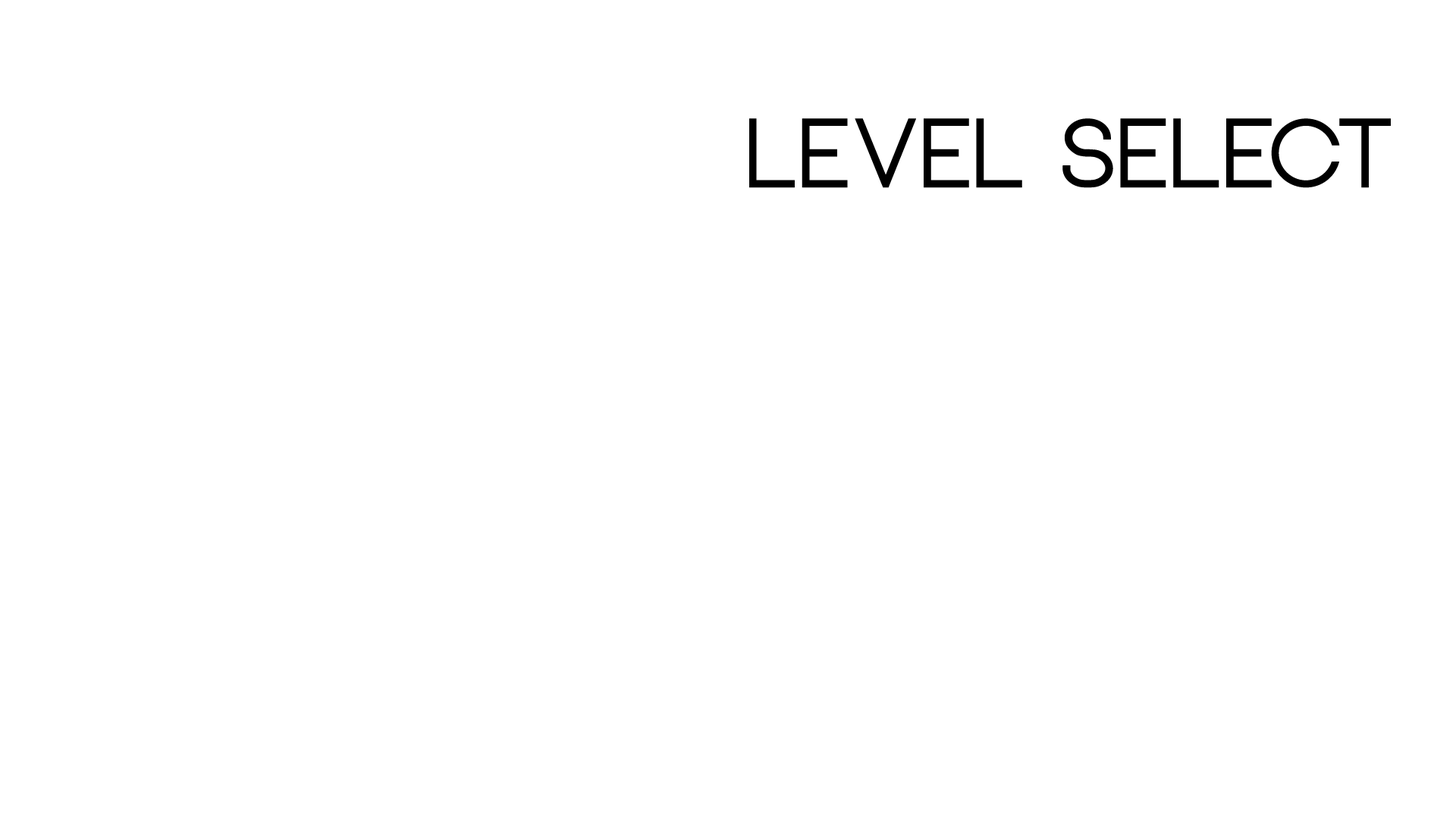
<style>
.page{position:relative;width:1456px;height:819px;background:#ffffff}
.page>*{position:absolute;margin:0}
.t1{font:96.1px "Neou-Bold";color:#000000}
</style>
<div class="page">
<p class="t1" style="left:749px;top:118px;width:642px;height:70px">Level select</p>
</div>
